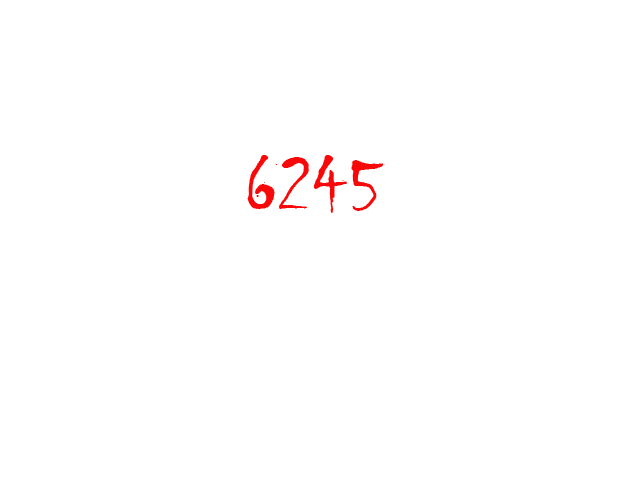
<style>
.page{position:relative;width:630px;height:500px;background:#ffffff}
.page>*{position:absolute;margin:0}
.t1{font:83.3px "Chiller-Regular";color:#f80909}
</style>
<div class="page">
<p class="t1" style="left:247px;top:155px;width:138px;height:58px">6245</p>
</div>
